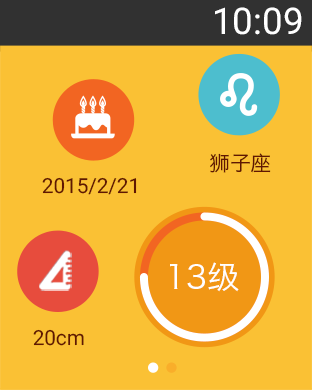
<style>
.page{position:relative;width:312px;height:390px;background:#fac134}
.page>*{position:absolute;margin:0}
.t1{font:36.7px "Roboto-Regular";color:#ffffff}
.t2{font:20.6px "HiraginoSansGB-W3";color:#601702}
.t3{font:20.6px "Roboto-Regular";color:#601702}
.t4{font:32.1px "HiraginoSansGB-W3";color:#ffffff}
</style>
<div class="page">
<p class="t1" style="left:215px;top:7px;width:87px;height:28px">10:09</p>
<p class="t2" style="left:210px;top:153px;width:61px;height:20px">狮子座</p>
<p class="t3" style="left:42px;top:177px;width:95px;height:18px">2015/2/21</p>
<p class="t4" style="left:170px;top:262px;width:69px;height:30px">13级</p>
<p class="t3" style="left:33px;top:329px;width:51px;height:17px">20cm</p>
</div>
